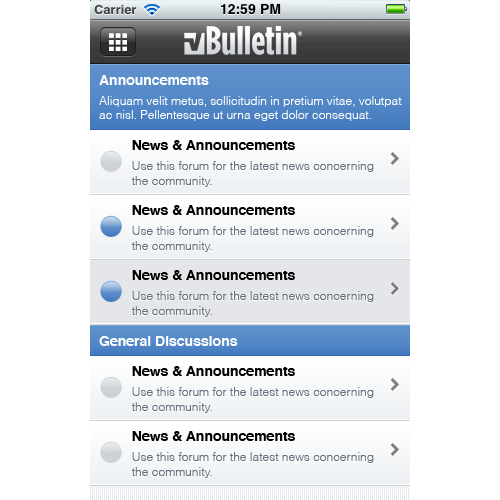
<style>
.page{position:relative;width:500px;height:500px;background:#ffffff}
.page>*{position:absolute;margin:0}
.t1{font:14px "Helvetica-Bold";color:#ffffff}
.t2{font:12px "Helvetica-Light";color:#ffffff}
.t3{font:14px "Helvetica-Bold"}
.t4{font:14px "Helvetica-Bold";color:#000000}
.t5{font:12px "Helvetica-Light";color:#676f7e}
</style>
<div class="page">
<p class="t1" style="left:99px;top:75px;width:110px;height:10px">Announcements</p>
<p class="t2" style="left:99px;top:96px;width:303px;height:25px">Aliquam velit metus, sollicitudin in pretium vitae, volutpat <br>ac nisl. Pellentesque ut urna eget dolor consequat.</p>
<p class="t3" style="left:131px;top:140px;width:163px;height:10px">News &amp; Announcements</p>
<p class="t4" style="left:132px;top:140px;width:163px;height:10px">News &amp; Announcements</p>
<p class="t5" style="left:131px;top:161px;width:243px;height:26px">Use this forum for the latest news concerning <br>the community.</p>
<p class="t3" style="left:131px;top:205px;width:163px;height:10px">News &amp; Announcements</p>
<p class="t4" style="left:132px;top:205px;width:163px;height:10px">News &amp; Announcements</p>
<p class="t5" style="left:131px;top:226px;width:243px;height:26px">Use this forum for the latest news concerning <br>the community.</p>
<p class="t3" style="left:131px;top:270px;width:163px;height:10px">News &amp; Announcements</p>
<p class="t4" style="left:132px;top:270px;width:163px;height:10px">News &amp; Announcements</p>
<p class="t5" style="left:131px;top:291px;width:243px;height:26px">Use this forum for the latest news concerning <br>the community.</p>
<p class="t1" style="left:99px;top:336px;width:139px;height:10px">General Discussions</p>
<p class="t3" style="left:131px;top:366px;width:163px;height:10px">News &amp; Announcements</p>
<p class="t4" style="left:132px;top:366px;width:163px;height:10px">News &amp; Announcements</p>
<p class="t5" style="left:131px;top:387px;width:243px;height:26px">Use this forum for the latest news concerning <br>the community.</p>
<p class="t3" style="left:131px;top:431px;width:163px;height:10px">News &amp; Announcements</p>
<p class="t4" style="left:132px;top:431px;width:163px;height:10px">News &amp; Announcements</p>
<p class="t5" style="left:131px;top:452px;width:243px;height:26px">Use this forum for the latest news concerning <br>the community.</p>
</div>
